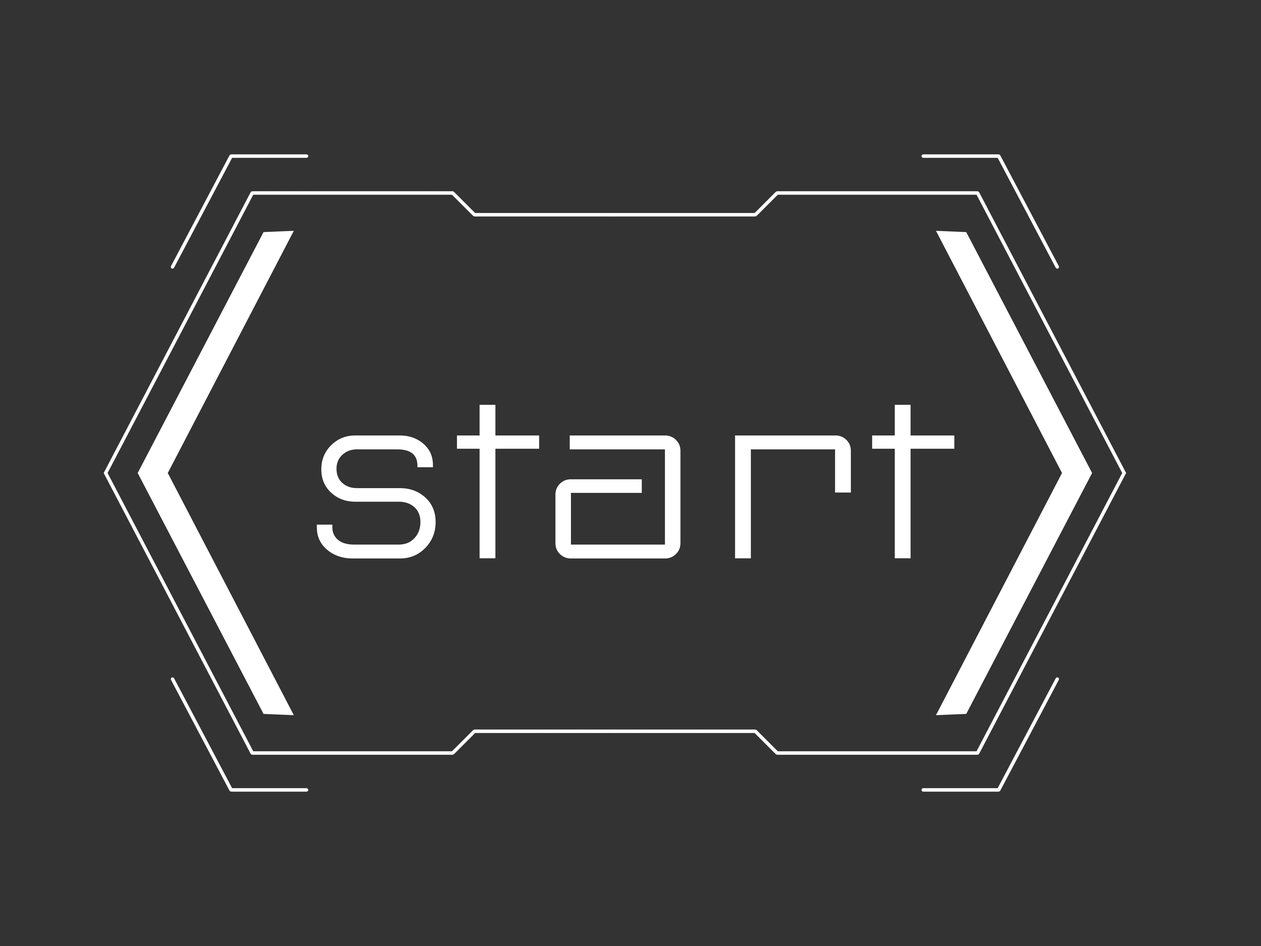
<style>
.page{position:relative;width:1261px;height:946px;background:#333333}
.page>*{position:absolute;margin:0}
.t1{font:297.6px "RedThinker-Light";color:#ffffff}
</style>
<div class="page">
<p class="t1" style="left:317px;top:404px;width:638px;height:154px">start</p>
</div>
